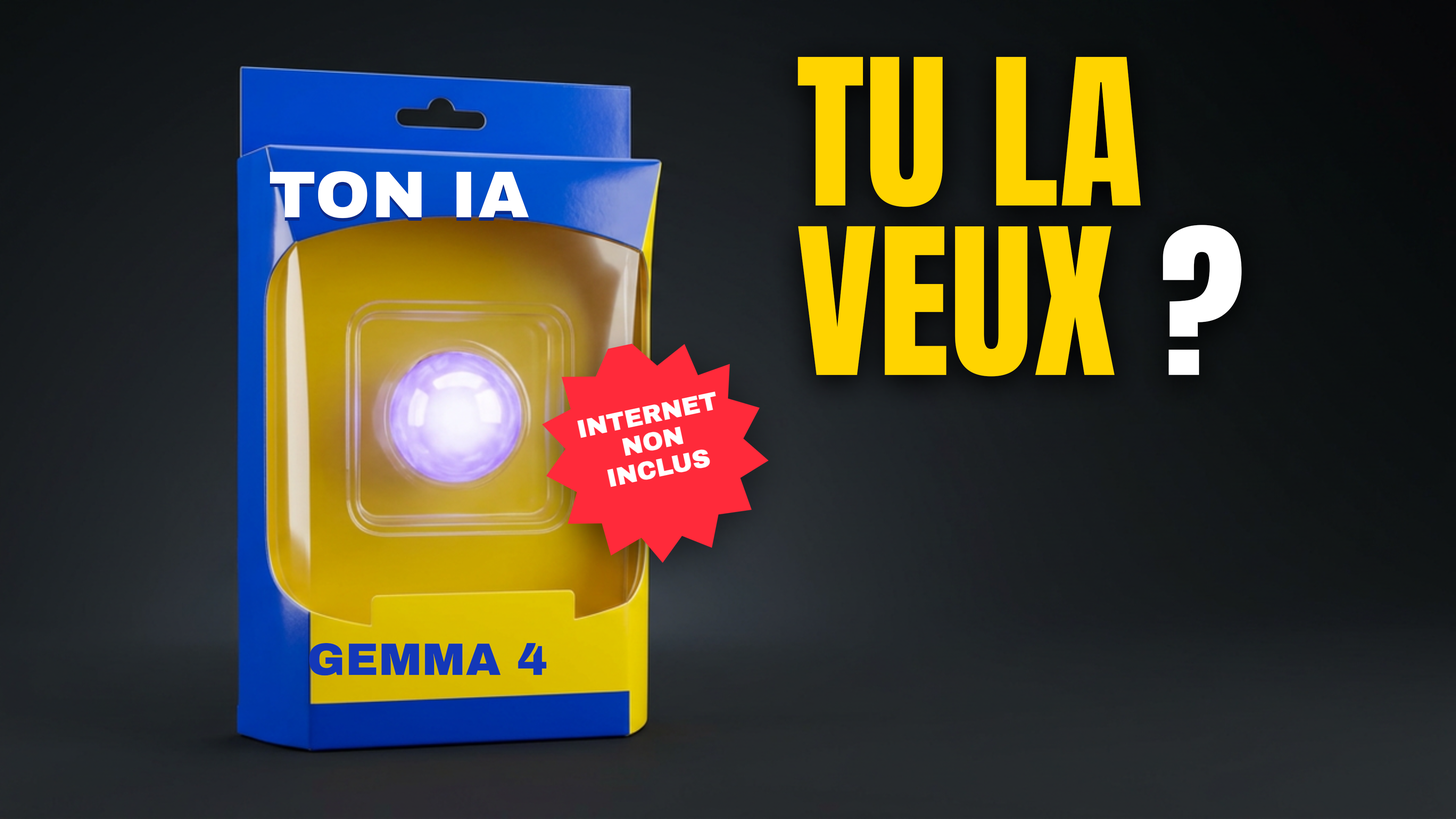
<style>
.page{position:relative;width:1456px;height:819px}
.page>*{position:absolute;margin:0}
.t1{font:172.9px/169.4px "Anton-Regular";letter-spacing:0.005em;color:#ffd400}
.t2{font:172.9px/169.4px "Anton-Regular";letter-spacing:0.005em;color:#ffffff}
.t3{font:66px "ArchivoBlack-Regular";letter-spacing:0.02em;color:#ffffff}
.t4{font:45.5px "ArchivoBlack-Regular";letter-spacing:0.01em;color:#1438b8}
</style>
<div class="page">
<p class="t1" style="left:797px;top:57px;width:445px;height:320px">TU LA<br>VEUX <span class="t2">?</span></p>
<p class="t3" style="left:270px;top:171px;width:259px;height:48px">TON IA</p>
<p class="t4" style="left:309px;top:643px;width:238px;height:33px">GEMMA 4</p>
</div>
